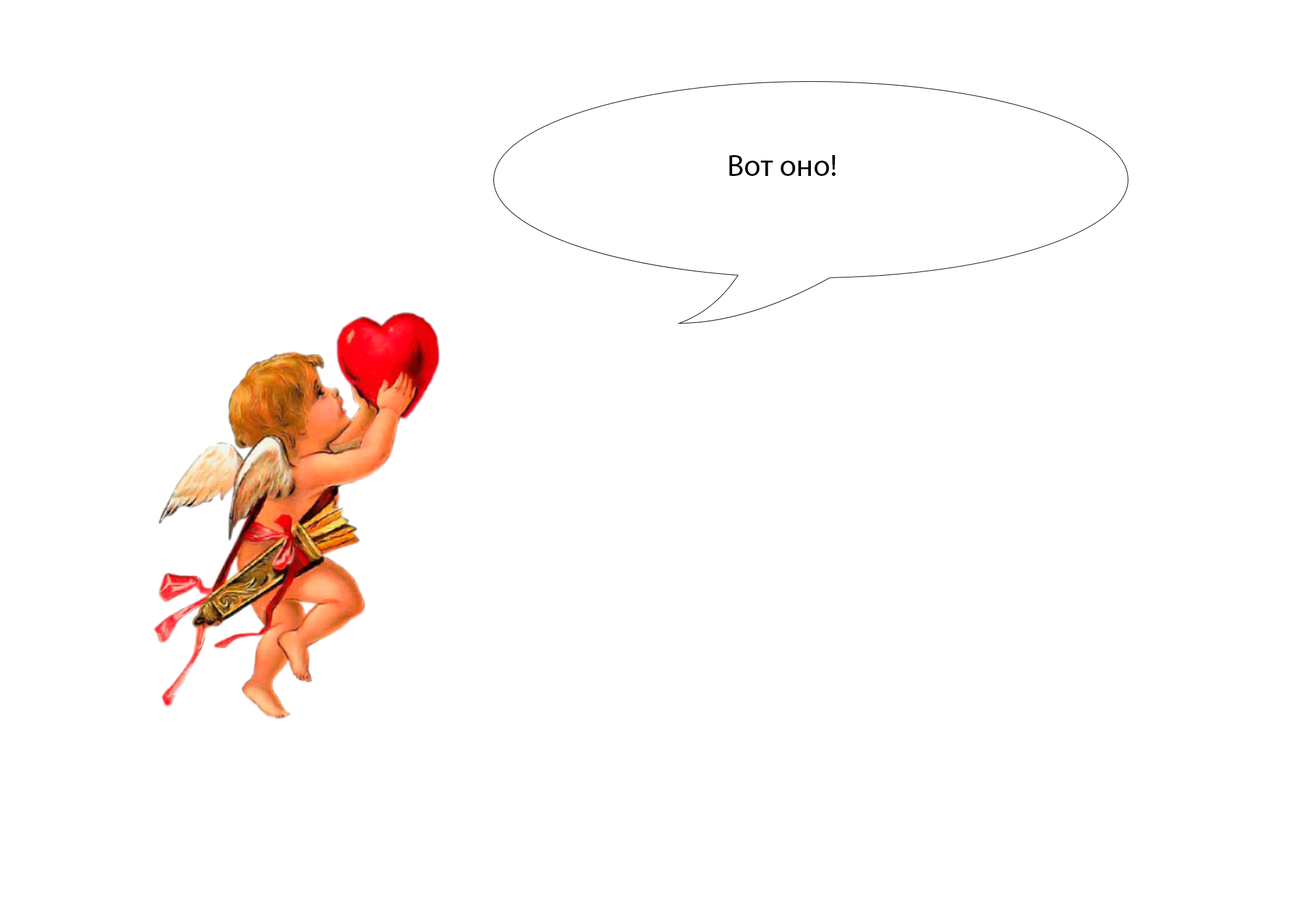
<style>
.page{position:relative;width:1292px;height:923px;background:#ffffff}
.page>*{position:absolute;margin:0}
.t1{font:30.8px "MyriadPro-Regular";color:#000000}
</style>
<div class="page">
<p class="t1" style="left:729px;top:155px;width:107px;height:21px">Вот оно!</p>
</div>
